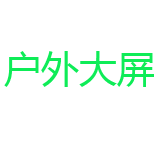
<style>
.page{position:relative;width:154px;height:154px;background:#ffffff}
.page>*{position:absolute;margin:0}
.t1{font:37.7px "MicrosoftYaHei";color:#0eec57}
</style>
<div class="page">
<p class="t1" style="left:4px;top:51px;width:151px;height:36px">户外大屏</p>
</div>
